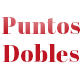
<style>
.page{position:relative;width:82px;height:82px;background:#ffffff}
.page>*{position:absolute;margin:0}
.t1{font:23.7px "AbrilFatface-Regular";letter-spacing:0.02em}
</style>
<div class="page">
<p class="t1" style="left:2px;top:17px;width:78px;height:46px;text-align:center">Puntos<br>Dobles</p>
</div>
